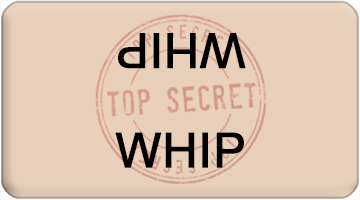
<style>
.page{position:relative;width:360px;height:200px;background:#e8d0bb}
.page>*{position:absolute;margin:0}
.t1{font:48px "ArialMT";color:#000000;font-weight:bold}
</style>
<div class="page">
<p class="t1" style="left:118px;top:33px;width:128px;height:36px;rotate:180deg">WHIP</p>
<p class="t1" style="left:115px;top:132px;width:129px;height:36px">WHIP</p>
</div>
